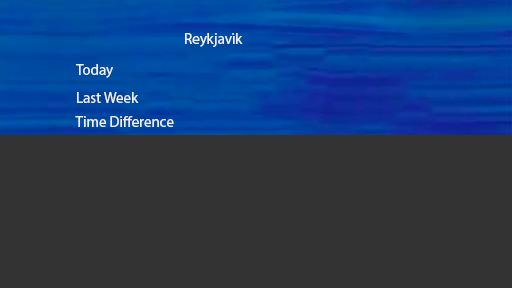
<style>
.page{position:relative;width:512px;height:288px;background:#333333}
.page>*{position:absolute;margin:0}
.t1{font:15px "MyriadPro-Regular";color:#f2f2f2}
</style>
<div class="page">
<p class="t1" style="left:185px;top:33px;width:58px;height:14px">Reykjavik</p>
<p class="t1" style="left:76px;top:64px;width:37px;height:14px">Today</p>
<p class="t1" style="left:77px;top:92px;width:62px;height:11px">Last Week</p>
<p class="t1" style="left:75px;top:116px;width:99px;height:11px">Time Difference</p>
</div>
